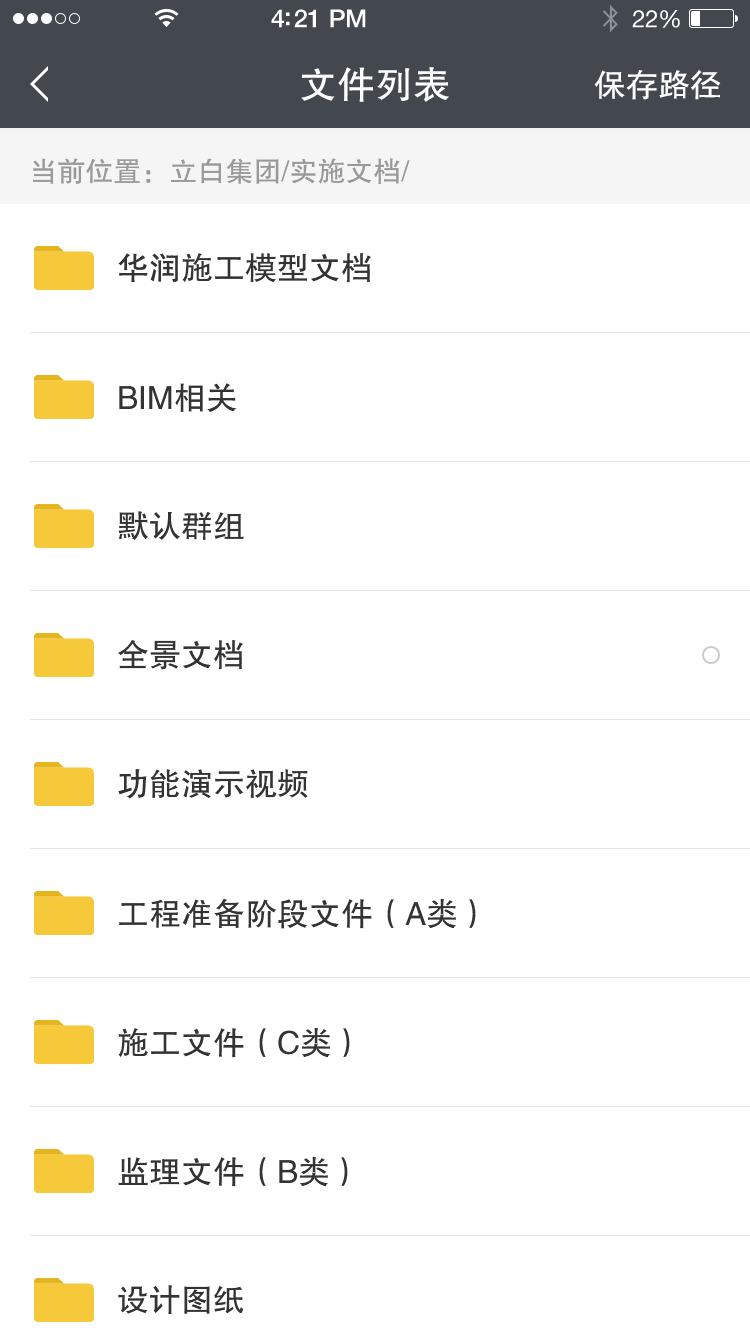
<style>
.page{position:relative;width:750px;height:1334px;background:#ffffff}
.page>*{position:absolute;margin:0}
.t1{font:38px "FZHTJW--GB1-0";color:#ffffff}
.t2{font:32px "FZHTJW--GB1-0";color:#ffffff}
.t3{font:28px "FZHTJW--GB1-0";color:#999999}
.t4{font:32px "FZHTJW--GB1-0";color:#333333}
</style>
<div class="page">
<p class="t1" style="left:301px;top:67px;width:148px;height:35px">文件列表</p>
<p class="t2" style="left:594px;top:70px;width:127px;height:30px">保存路径</p>
<p class="t3" style="left:33px;top:158px;width:377px;height:26px">当前位置：立白集团/实施文档/</p>
<p class="t4" style="left:118px;top:253px;width:253px;height:30px">华润施工模型文档</p>
<p class="t4" style="left:119px;top:383px;width:118px;height:29px">BIM相关</p>
<p class="t4" style="left:118px;top:511px;width:126px;height:29px">默认群组</p>
<p class="t4" style="left:118px;top:640px;width:125px;height:30px">全景文档</p>
<p class="t4" style="left:118px;top:769px;width:190px;height:30px">功能演示视频</p>
<p class="t4" style="left:119px;top:899px;width:357px;height:30px">工程准备阶段文件（A类）</p>
<p class="t4" style="left:118px;top:1028px;width:232px;height:30px">施工文件（C类）</p>
<p class="t4" style="left:118px;top:1157px;width:230px;height:30px">监理文件（B类）</p>
<p class="t4" style="left:118px;top:1285px;width:126px;height:29px">设计图纸</p>
</div>
